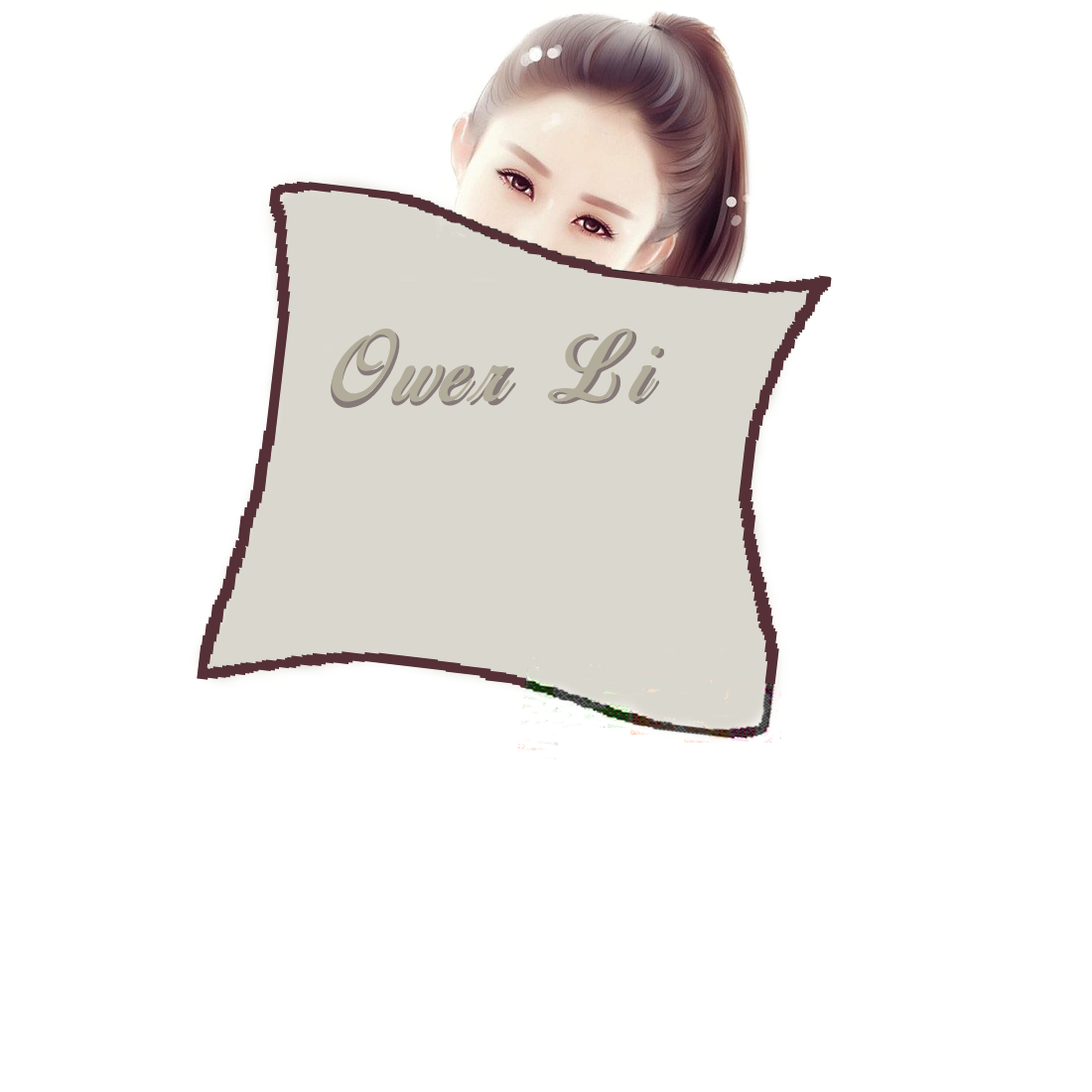
<style>
.page{position:relative;width:1092px;height:1092px;background:#ffffff}
.page>*{position:absolute;margin:0}
.t1{font:87.4px "BirdsofParadise";color:#b2ac9a}
.t2{font:92.3px "BirdsofParadise"}
.t3{font:87.4px "BirdsofParadise"}
</style>
<div class="page">
<p class="t1" style="left:332px;top:329px;width:328px;height:73px">Ower  Li</p>
<p class="t2" style="left:331px;top:331px;width:69px;height:77px">O</p>
<p class="t3" style="left:552px;top:331px;width:112px;height:73px">Li</p>
<p class="t2" style="left:391px;top:366px;width:125px;height:40px">wer</p>
</div>
